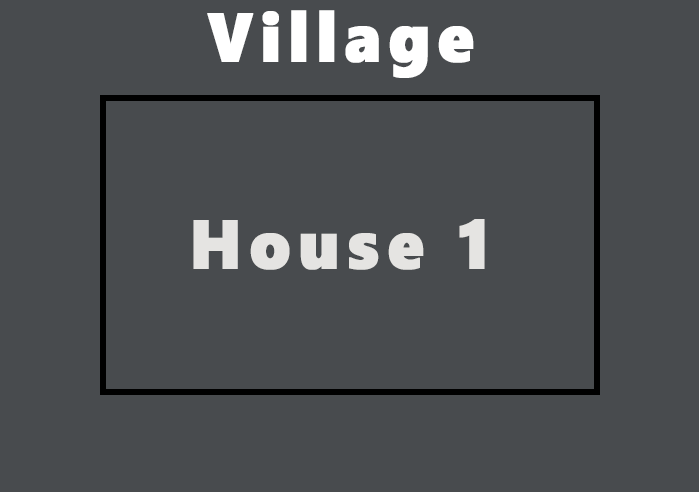
<style>
.page{position:relative;width:699px;height:492px;background:#484b4e}
.page>*{position:absolute;margin:0}
.t1{font:68.5px "SegoeWP-Black";letter-spacing:0.1em;color:#ffffff;font-weight:bold;scale:0.93 1}
.t2{font:68.5px "SegoeWP-Black";letter-spacing:0.1em;color:#e5e4e2;font-weight:bold;scale:0.93 1}
</style>
<div class="page">
<p class="t1" style="left:207px;top:10px;width:267px;height:68px">Village</p>
<p class="t2" style="left:193px;top:219px;width:292px;height:51px">House 1</p>
</div>
